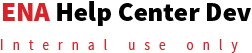
<style>
.page{position:relative;width:252px;height:53px;background:#ffffff}
.page>*{position:absolute;margin:0}
.t1{font:27px "SourceSansPro-Black";color:#000000}
.t2{font:27px "SourceSansPro-Black";color:#d72329}
.t3{font:15.9px "SourceSansPro-Regular";letter-spacing:0.73em;color:#d72329;scale:0.8 1}
</style>
<div class="page">
<p class="t1" style="left:3px;top:1px;width:248px;height:25px"><span class="t2">ENA </span>Help Center Dev</p>
<p class="t3" style="left:1px;top:39px;width:237px;height:14px">Internal use only</p>
</div>
